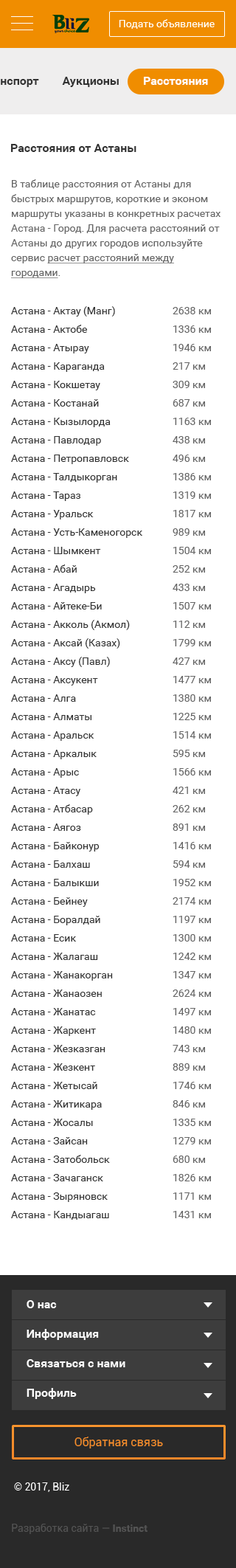
<style>
.page{position:relative;width:236px;height:1568px;background:#ffffff}
.page>*{position:absolute;margin:0}
.t1{font:11.8px "Roboto-Bold";color:#333333}
.t2{font:10.3px/14.8px "Roboto-Regular";color:#666666}
.t3{font:10.3px/14.8px "Roboto-Regular";color:#666666;text-decoration:underline}
.t4{font:10.3px/14.8px "Roboto-Regular";color:#333333}
</style>
<div class="page">
<p class="t1" style="left:11px;top:144px;width:126px;height:8px">Расстояния от Астаны</p>
<p class="t2" style="left:11px;top:179px;width:210px;height:99px">В таблице расстояния от Астаны для быстрых маршрутов, короткие и эконом маршруты указаны в конкретных расчетах Астана - Город. Для расчета расстояний от Астаны до других городов используйте сервис <span class="t3">расчет расстояний между городами</span>.</p>
<p class="t4" style="left:11px;top:306px;width:132px;height:914px">Астана - Актау (Манг)<br>Астана - Актобе<br>Астана - Атырау<br>Астана - Караганда<br>Астана - Кокшетау<br>Астана - Костанай<br>Астана - Кызылорда<br>Астана - Павлодар<br>Астана - Петропавловск<br>Астана - Талдыкорган<br>Астана - Тараз<br>Астана - Уральск<br>Астана - Усть-Каменогорск<br>Астана - Шымкент<br>Астана - Абай<br>Астана - Агадырь<br>Астана - Айтеке-Би <br>Астана - Акколь (Акмол)<br>Астана - Аксай (Казах)<br>Астана - Аксу (Павл)<br>Астана - Аксукент<br>Астана - Алга<br>Астана - Алматы<br>Астана - Аральск<br>Астана - Аркалык<br>Астана - Арыс<br>Астана - Атасу<br>Астана - Атбасар<br>Астана - Аягоз<br>Астана - Байконур<br>Астана - Балхаш<br>Астана - Балыкши<br>Астана - Бейнеу<br>Астана - Боралдай<br>Астана - Есик<br>Астана - Жалагаш<br>Астана - Жанакорган<br>Астана - Жанаозен<br>Астана - Жанатас<br>Астана - Жаркент<br>Астана - Жезказган<br>Астана - Жезкент<br>Астана - Жетысай<br>Астана - Житикара<br>Астана - Жосалы<br>Астана - Зайсан<br>Астана - Затобольск<br>Астана - Зачаганск<br>Астана - Зыряновск<br>Астана - Кандыагаш</p>
<p class="t2" style="left:173px;top:307px;width:38px;height:911px">2638 км<br>1336 км<br>1946 км<br>217 км<br>309 км<br>687 км<br>1163 км<br>438 км<br>496 км<br>1386 км<br>1319 км<br>1817 км<br>989 км<br>1504 км<br>252 км<br>433 км<br>1507 км<br>112 км<br>1799 км<br>427 км<br>1477 км<br>1380 км<br>1225 км<br>1514 км<br>595 км<br>1566 км<br>421 км<br>262 км<br>891 км<br>1416 км<br>594 км<br>1952 км<br>2174 км<br>1197 км<br>1300 км<br>1242 км<br>1347 км<br>2624 км<br>1497 км<br>1480 км<br>743 км<br>889 км<br>1746 км<br>846 км<br>1335 км<br>1279 км<br>680 км<br>1826 км<br>1171 км<br>1431 км</p>
</div>
